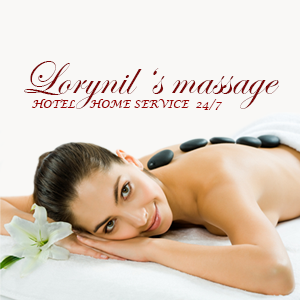
<style>
.page{position:relative;width:300px;height:300px;background:#f9f8f6}
.page>*{position:absolute;margin:0}
.t1{font:48px "EdwardianScriptITC";color:#790808}
.t2{font:11px "LucidaCalligraphy-Italic";color:#9a0505}
</style>
<div class="page">
<p class="t1" style="left:24px;top:61px;width:255px;height:48px">Lorynil ‘s massage</p>
<p class="t2" style="left:31px;top:99px;width:191px;height:11px">HOTEL    HOME SERVICE  24/7</p>
</div>
